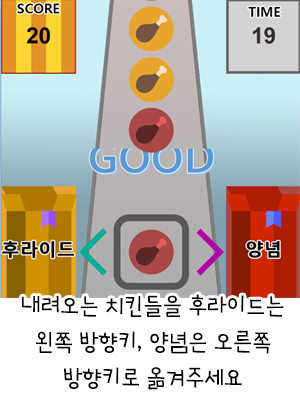
<style>
.page{position:relative;width:300px;height:400px;background:#ffffff}
.page>*{position:absolute;margin:0}
.t1{font:24px/36px "Goyang";color:#000000}
</style>
<div class="page">
<p class="t1" style="left:22px;top:294px;width:262px;height:96px;text-align:center">내려오는 치킨들을 후라이드는 왼쪽 방향키, 양념은 오른쪽 방향키로 옮겨주세요</p>
</div>
